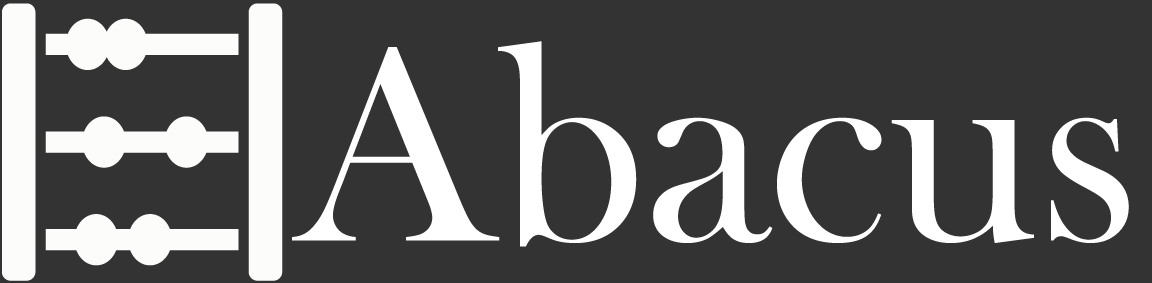
<style>
.page{position:relative;width:1152px;height:283px;background:#333333}
.page>*{position:absolute;margin:0}
.t1{font:290px "BaskOldFace";color:#ffffff}
</style>
<div class="page">
<p class="t1" style="left:292px;top:41px;width:837px;height:206px">Abacus</p>
</div>
